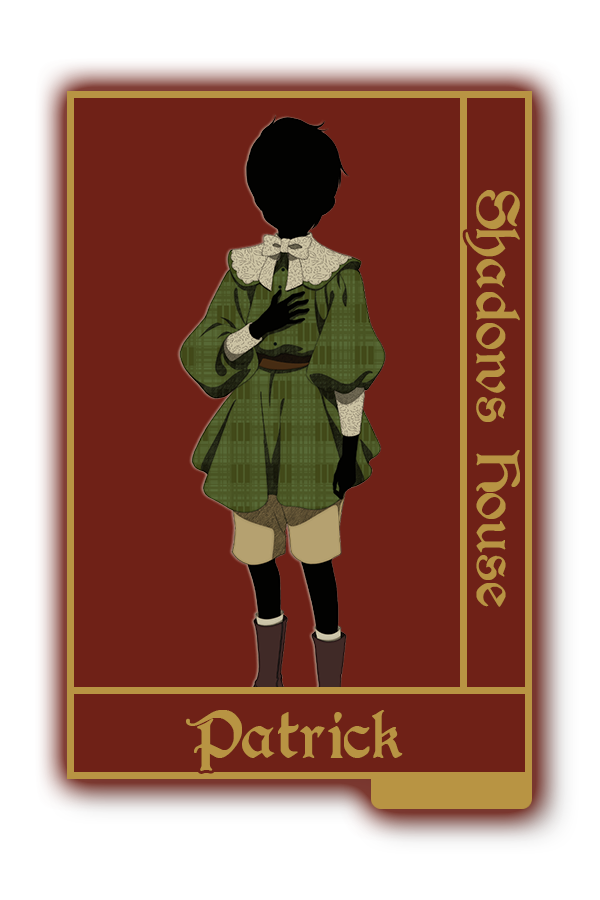
<style>
.page{position:relative;width:600px;height:900px;background:#6f2117}
.page>*{position:absolute;margin:0}
.t1{font:67.9px "Augusta-Regular";color:#b89443}
.t2{font:75px "Augusta-Regular";color:#b89443}
</style>
<div class="page">
<p class="t1" style="left:465px;top:190px;width:55px;height:417px;rotate:90deg">Shadows House</p>
<p class="t2" style="left:186px;top:710px;width:217px;height:61px">Patrick</p>
</div>
